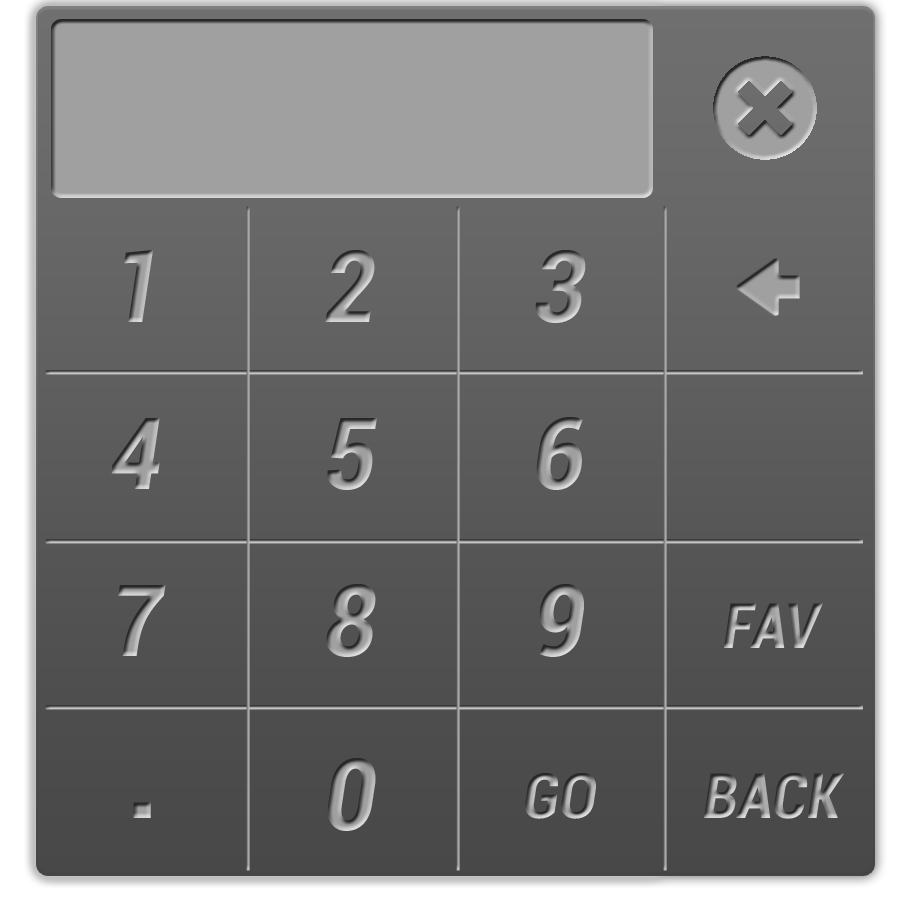
<style>
.page{position:relative;width:900px;height:900px}
.page>*{position:absolute;margin:0}
.t1{font:100px "Roboto-BoldCondensedItalic"}
.t2{font:62.5px "Roboto-BoldCondensedItalic"}
.t3{font:125px "Roboto-BoldCondensed"}
</style>
<div class="page">
<p class="t1" style="left:124px;top:250px;width:29px;height:72px">1</p>
<p class="t1" style="left:325px;top:250px;width:50px;height:72px">2</p>
<p class="t1" style="left:535px;top:250px;width:51px;height:73px">3</p>
<p class="t1" style="left:111px;top:418px;width:49px;height:71px">4</p>
<p class="t1" style="left:327px;top:418px;width:50px;height:72px">5</p>
<p class="t1" style="left:536px;top:417px;width:47px;height:73px">6</p>
<p class="t1" style="left:118px;top:585px;width:48px;height:71px">7</p>
<p class="t1" style="left:326px;top:584px;width:50px;height:73px">8</p>
<p class="t1" style="left:539px;top:584px;width:45px;height:73px">9</p>
<p class="t2" style="left:724px;top:603px;width:99px;height:45px">FAV</p>
<p class="t1" style="left:327px;top:758px;width:49px;height:73px">0</p>
<p class="t2" style="left:525px;top:773px;width:71px;height:46px">GO</p>
<p class="t2" style="left:704px;top:773px;width:140px;height:46px">BACK</p>
<p class="t3" style="left:133px;top:802px;width:18px;height:16px">.</p>
</div>
